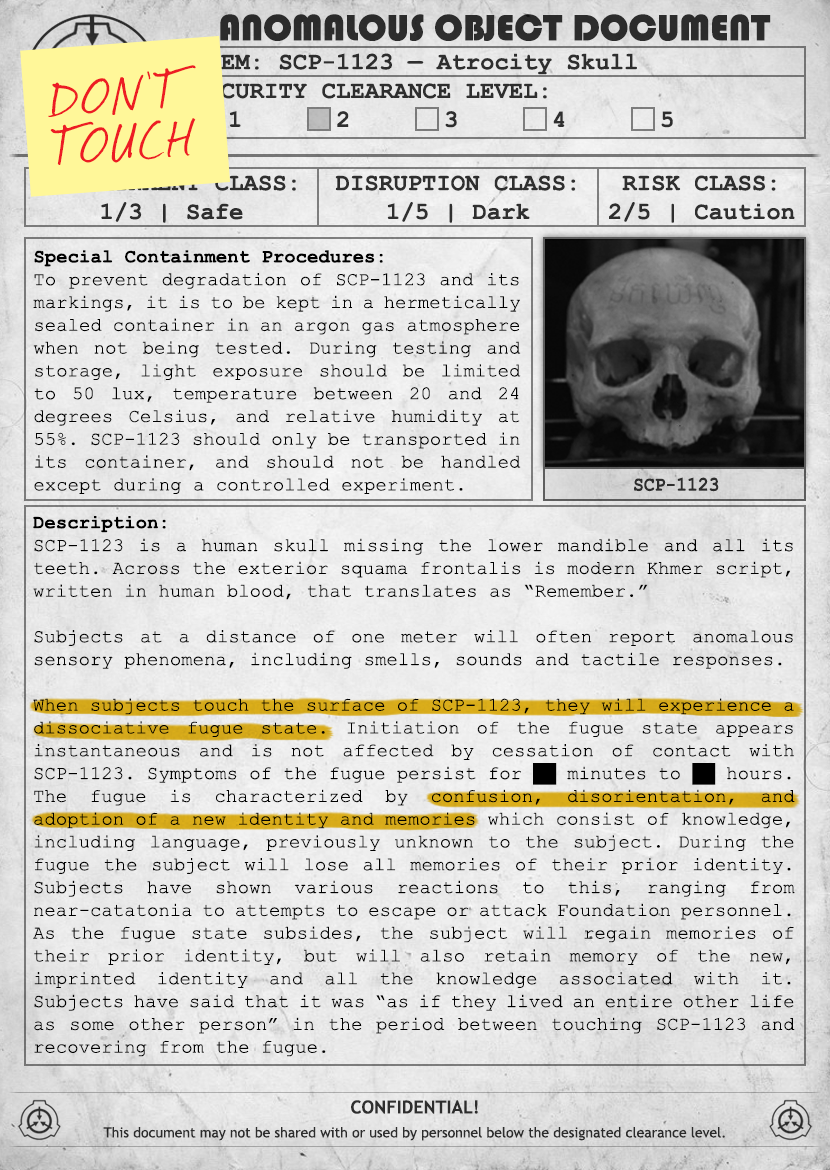
<style>
.page{position:relative;width:830px;height:1170px}
.page>*{position:absolute;margin:0}
.t1{font:38px "Bauhaus93";color:#333333;text-transform:uppercase}
.t2{font:24px "CourierNewPS-BoldMT";color:#333333}
.t3{font:24px "CourierNewPS-BoldMT";color:#333333;text-transform:uppercase}
.t4{font:60.2px/48.7px "Journal";color:#ed1c24}
.t5{font:60.2px/48.7px "Journal";letter-spacing:0.1em;color:#ed1c24}
.t6{font:60.2px/48.7px "Journal";letter-spacing:0.06em;color:#ed1c24}
.t7{font:60.2px/48.7px "Journal";letter-spacing:-0.24em;color:#ed1c24}
.t8{font:24px "CourierNewPS-BoldMT"}
.t9{font:19px "CourierNewPSMT";color:#000000}
.t10{font:19px "CourierNewPS-BoldMT";color:#000000}
.t11{font:20.1px "CourierNewPS-BoldMT";color:#333333;scale:0.9 1}
.t12{font:14px/24px "TrebuchetMS";color:#333333}
.t13{font:18px/24px "TrebuchetMS-Bold";color:#333333}
</style>
<div class="page">
<p class="t1" style="left:220px;top:14px;width:551px;height:27px">anomalous object document</p>
<p class="t2" style="left:193px;top:53px;width:480px;height:75px">ITEM: SCP-1123 — Atrocity Skull<br><span class="t3">Security CLEARANCE LEVEL:</span> <br> 1   2   3   4   5</p>
<p class="t4" style="left:48px;top:65px;width:148px;height:100px;text-align:justify;rotate:-4deg">DO<span class="t5">N</span><span class="t6">'</span>T<br><span class="t7">T</span>OUCH</p>
<p class="t8" style="left:42px;top:175px;width:254px;height:48px;text-align:center">CONTAINMENT CLASS:<br>1/3 | Safe</p>
<p class="t2" style="left:335px;top:175px;width:241px;height:48px;text-align:center">DISRUPTION CLASS:<br>1/5 | Dark</p>
<p class="t2" style="left:609px;top:175px;width:186px;height:48px;text-align:center">RISK CLASS:<br>2/5 | Caution</p>
<p class="t9" style="left:33px;top:250px;width:488px;height:244px;text-align:justify"><span class="t10">Special Containment Procedures:<br></span>To prevent degradation of SCP-1123 and its markings, it is to be kept in a hermetically sealed container in an argon gas atmosphere when not being tested. During testing and storage, light exposure should be limited to 50 lux, temperature between 20 and 24 degrees Celsius, and relative humidity at 55%. SCP-1123 should only be transported in its container, and should not be handled except during a controlled experiment.</p>
<p class="t11" style="left:634px;top:477px;width:85px;height:15px">SCP-1123</p>
<p class="t9" style="left:33px;top:516px;width:762px;height:541px;text-align:justify"><span class="t10">Description:<br></span>SCP-1123 is a human skull missing the lower mandible and all its teeth. Across the exterior squama frontalis is modern Khmer script, written in human blood, that translates as “Remember.” <br><br>Subjects at a distance of one meter will often report anomalous sensory phenomena, including smells, sounds and tactile responses.<br><br>When subjects touch the surface of SCP-1123, they will experience a dissociative fugue state. Initiation of the fugue state appears instantaneous and is not affected by cessation of contact with SCP-1123. Symptoms of the fugue persist for ██ minutes to ██ hours. The fugue is characterized by confusion, disorientation, and adoption of a new identity and memories which consist of knowledge, including language, previously unknown to the subject. During the fugue the subject will lose all memories of their prior identity. Subjects have shown various reactions to this, ranging from near-catatonia to attempts to escape or attack Foundation personnel. As the fugue state subsides, the subject will regain memories of their prior identity, but will also retain memory of the new, imprinted identity and all the knowledge associated with it. Subjects have said that it was “as if they lived an entire other life as some other person” in the period between touching SCP-1123 and recovering from the fugue.</p>
<p class="t12" style="left:103px;top:1100px;width:622px;height:41px;text-align:center"><span class="t13">CONFIDENTIAL!<br></span>This document may not be shared with or used by personnel below the designated clearance level.</p>
</div>
